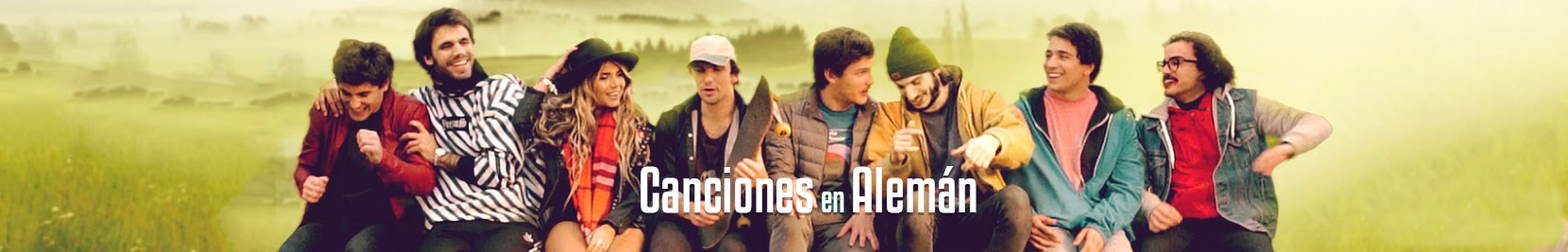
<style>
.page{position:relative;width:1568px;height:252px}
.page>*{position:absolute;margin:0}
.t1{font:56.6px "KenyanCoffeeRg-Regular";color:#ffffff}
.t2{font:34px "KenyanCoffeeRg-Regular";color:#ffffff}
</style>
<div class="page">
<p class="t1" style="left:641px;top:166px;width:335px;height:47px">Canciones<span class="t2"> en </span>Alemán</p>
</div>
